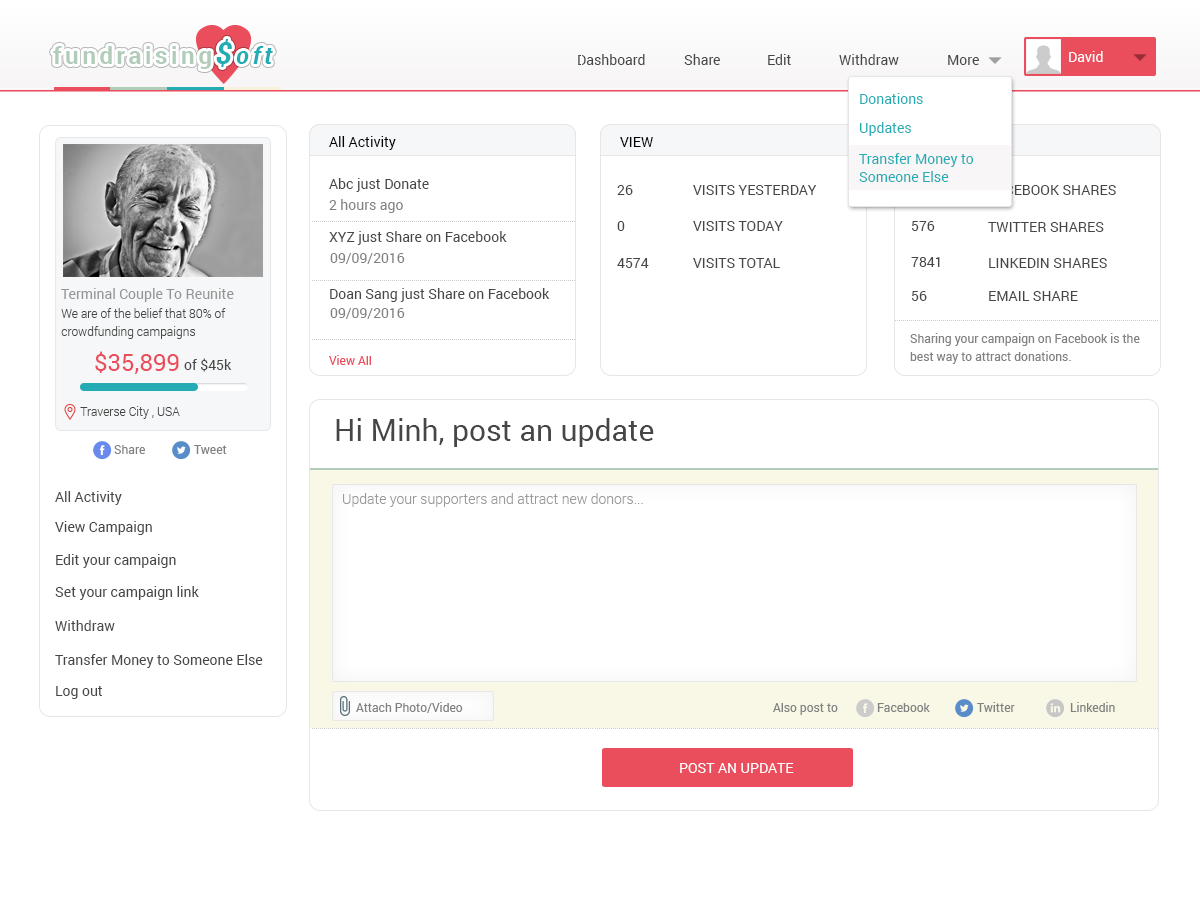
<style>
.page{position:relative;width:1200px;height:899px;background:#ffffff}
.page>*{position:absolute;margin:0}
.t1{font:24px "Roboto-Bold";letter-spacing:0.15em;color:#b2ccba}
.t2{font:30px "Roboto-BoldItalic";letter-spacing:0.15em;color:#23acb4}
.t3{font:24px "Roboto-BoldItalic";letter-spacing:0.15em;color:#23acb4}
.t4{font:14px "Roboto-Regular";color:#464646}
.t5{font:14px "Roboto-Regular";color:#ffffff}
.t6{font:14px "Roboto-Regular";color:#23acb4}
.t7{font:14px "Roboto-Regular";color:#000000}
.t8{font:14px/18px "Roboto-Regular";color:#23acb4}
.t9{font:14px "Roboto-Regular";color:#818181}
.t10{font:14px "Roboto-Regular";color:#959595}
.t11{font:12px/18px "Roboto-Light";color:#464646}
.t12{font:12px/18px "Roboto-Regular";color:#818181}
.t13{font:24px "Roboto-Regular";color:#ea4d5b}
.t14{font:12px "Roboto-Regular";color:#ea4d5b}
.t15{font:12px "Roboto-Light";color:#464646}
.t16{font:30px "Roboto-Regular";color:#464646}
.t17{font:12px "Roboto-Regular";color:#818181}
.t18{font:14px "Roboto-Light";color:#9b9999}
.t19{font:14px "Roboto-Regular";color:#ffffff;text-transform:uppercase}
</style>
<div class="page">
<p class="t1" style="left:53px;top:39px;width:220px;height:30px">fundraising<span class="t2">$</span><span class="t3">oft</span></p>
<p class="t4" style="left:578px;top:54px;width:67px;height:11px">Dashboard</p>
<p class="t4" style="left:684px;top:54px;width:36px;height:11px">Share</p>
<p class="t4" style="left:768px;top:54px;width:23px;height:11px">Edit</p>
<p class="t4" style="left:839px;top:54px;width:60px;height:11px">Withdraw</p>
<p class="t5" style="left:1069px;top:51px;width:34px;height:11px">David</p>
<p class="t4" style="left:948px;top:55px;width:31px;height:10px">More</p>
<p class="t6" style="left:860px;top:93px;width:63px;height:11px">Donations</p>
<p class="t6" style="left:859px;top:122px;width:52px;height:14px">Updates</p>
<p class="t7" style="left:329px;top:136px;width:67px;height:14px">All Activity</p>
<p class="t7" style="left:620px;top:137px;width:33px;height:10px">VIEW</p>
<p class="t8" style="left:859px;top:153px;width:115px;height:29px">Transfer Money to <br>Someone Else</p>
<p class="t4" style="left:329px;top:178px;width:100px;height:14px">Abc just Donate</p>
<p class="t4" style="left:617px;top:185px;width:16px;height:10px">26</p>
<p class="t4" style="left:693px;top:185px;width:124px;height:10px">VISITS YESTERDAY</p>
<p class="t4" style="left:989px;top:185px;width:127px;height:10px">FACEBOOK SHARES</p>
<p class="t9" style="left:329px;top:199px;width:74px;height:14px">2 hours ago</p>
<p class="t4" style="left:617px;top:221px;width:8px;height:10px">0</p>
<p class="t4" style="left:693px;top:221px;width:90px;height:10px">VISITS TODAY</p>
<p class="t4" style="left:912px;top:221px;width:23px;height:10px">576</p>
<p class="t4" style="left:988px;top:222px;width:116px;height:10px">TWITTER SHARES</p>
<p class="t4" style="left:329px;top:231px;width:178px;height:14px">XYZ just Share on Facebook</p>
<p class="t9" style="left:330px;top:253px;width:75px;height:11px">09/09/2016</p>
<p class="t4" style="left:911px;top:257px;width:29px;height:10px">7841</p>
<p class="t4" style="left:617px;top:258px;width:32px;height:10px">4574</p>
<p class="t4" style="left:693px;top:258px;width:87px;height:10px">VISITS TOTAL</p>
<p class="t4" style="left:989px;top:258px;width:118px;height:10px">LINKEDIN SHARES</p>
<p class="t10" style="left:61px;top:288px;width:173px;height:14px">Terminal Couple To Reunite</p>
<p class="t4" style="left:330px;top:288px;width:220px;height:14px">Doan Sang just Share on Facebook</p>
<p class="t4" style="left:912px;top:291px;width:15px;height:10px">56</p>
<p class="t4" style="left:989px;top:291px;width:89px;height:10px">EMAIL SHARE</p>
<p class="t11" style="left:61px;top:308px;width:165px;height:31px">We are of the belief that 80% of crowdfunding campaigns</p>
<p class="t9" style="left:330px;top:308px;width:75px;height:11px">09/09/2016</p>
<p class="t12" style="left:910px;top:333px;width:230px;height:31px">Sharing your campaign on Facebook is the <br>best way to attract donations.</p>
<p class="t13" style="left:95px;top:351px;width:84px;height:23px">$35,899</p>
<p class="t4" style="left:184px;top:358px;width:48px;height:14px">of $45k</p>
<p class="t14" style="left:329px;top:355px;width:42px;height:10px">View All</p>
<p class="t15" style="left:80px;top:406px;width:100px;height:13px">Traverse City , USA</p>
<p class="t16" style="left:336px;top:418px;width:318px;height:29px">Hi Minh, post an update</p>
<p class="t17" style="left:114px;top:445px;width:31px;height:9px">Share</p>
<p class="t17" style="left:194px;top:445px;width:33px;height:9px">Tweet</p>
<p class="t4" style="left:55px;top:491px;width:67px;height:14px">All Activity</p>
<p class="t18" style="left:343px;top:493px;width:300px;height:14px">Update your supporters and attract new donors...</p>
<p class="t4" style="left:55px;top:521px;width:97px;height:14px">View Campaign</p>
<p class="t4" style="left:56px;top:554px;width:120px;height:14px">Edit your campaign</p>
<p class="t4" style="left:55px;top:586px;width:144px;height:14px">Set your campaign link</p>
<p class="t4" style="left:55px;top:620px;width:60px;height:11px">Withdraw</p>
<p class="t4" style="left:55px;top:654px;width:208px;height:14px">Transfer Money to Someone Else</p>
<p class="t4" style="left:56px;top:686px;width:46px;height:13px">Log out</p>
<p class="t17" style="left:356px;top:702px;width:107px;height:11px">Attach Photo/Video</p>
<p class="t17" style="left:977px;top:702px;width:38px;height:10px">Twitter</p>
<p class="t17" style="left:1070px;top:702px;width:45px;height:10px">Linkedin</p>
<p class="t17" style="left:773px;top:703px;width:65px;height:12px">Also post to</p>
<p class="t17" style="left:877px;top:703px;width:53px;height:9px">Facebook</p>
<p class="t19" style="left:680px;top:763px;width:114px;height:10px">POST AN UPDATE</p>
</div>
